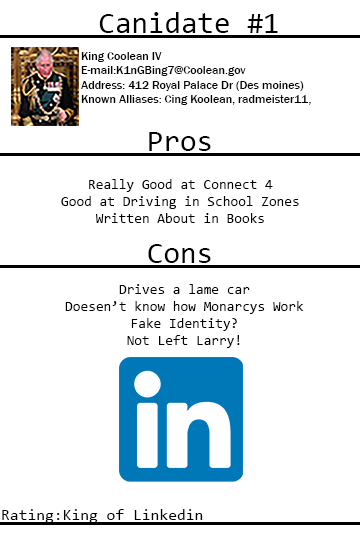
<style>
.page{position:relative;width:360px;height:540px;background:#ffffff}
.page>*{position:absolute;margin:0}
.t1{font:30px "Consolas";color:#000000}
.t2{font:12px "FranklinGothic-Medium";color:#000000}
.t3{font:14px "Consolas";color:#000000}
.t4{font:16px "Consolas";color:#000000}
</style>
<div class="page">
<p class="t1" style="left:99px;top:12px;width:179px;height:21px">Canidate #1</p>
<p class="t2" style="left:81px;top:52px;width:230px;height:53px">King Coolean IV<br>E-mail:K1nGBing7@Coolean.gov<br>Address: 412 Royal Palace Dr (Des moines)<br>Known Alliases: Cing Koolean, radmeister11,</p>
<p class="t1" style="left:149px;top:132px;width:62px;height:19px">Pros</p>
<p class="t3" style="left:61px;top:179px;width:238px;height:44px;text-align:center">Really Good at Connect 4<br>Good at Driving in School Zones<br>Written About in Books</p>
<p class="t1" style="left:148px;top:244px;width:63px;height:19px">Cons</p>
<p class="t3" style="left:65px;top:284px;width:239px;height:64px;text-align:center">Drives a lame car<br>Doesen’t know how Monarcys Work<br>Fake Identity?<br>Not Left Larry!</p>
<p class="t4" style="left:2px;top:509px;width:201px;height:14px">Rating:King of Linkedin</p>
</div>
